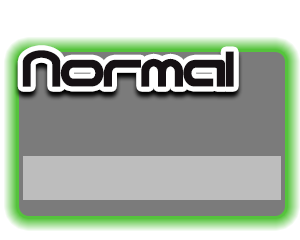
<style>
.page{position:relative;width:300px;height:240px;background:#7b7b7b}
.page>*{position:absolute;margin:0}
.t1{font:60px "NicoKaku";letter-spacing:-0.1em;color:#151013}
</style>
<div class="page">
<p class="t1" style="left:22px;top:50px;width:212px;height:37px">Normal</p>
</div>
